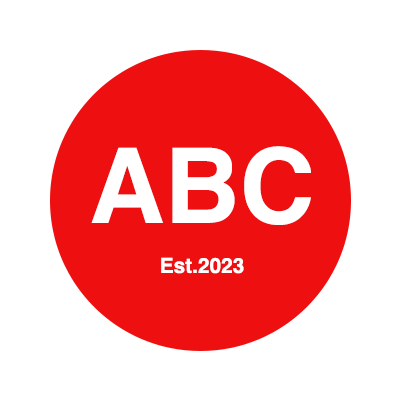
<style>
.page{position:relative;width:400px;height:400px;background:#ffffff}
.page>*{position:absolute;margin:0}
.t1{font:20.8px "Helvetica-Bold";color:#ffffff}
.t2{font:104.2px "Helvetica-Bold";color:#ffffff}
</style>
<div class="page">
<p class="t1" style="left:91px;top:146px;width:220px;height:128px;text-align:center"><span class="t2">ABC<br></span><br>Est.2023</p>
</div>
